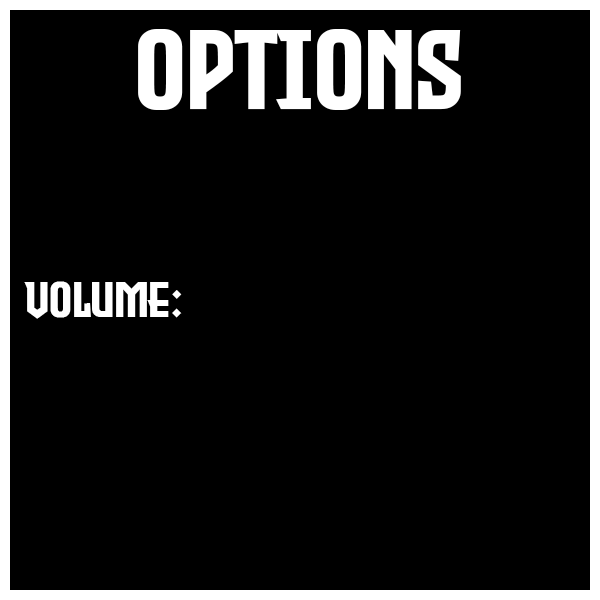
<style>
.page{position:relative;width:600px;height:600px;background:#000000}
.page>*{position:absolute;margin:0}
.t1{font:111.7px "EvilEmpire";color:#ffffff}
.t2{font:50px "EvilEmpire";color:#ffffff}
</style>
<div class="page">
<p class="t1" style="left:138px;top:29px;width:323px;height:81px">OPTIONS</p>
<p class="t2" style="left:24px;top:281px;width:158px;height:38px">VOLUME:</p>
</div>
